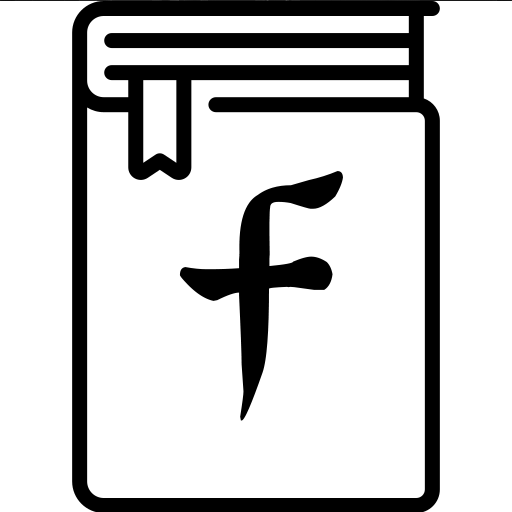
<style>
.page{position:relative;width:512px;height:512px;background:#ffffff}
.page>*{position:absolute;margin:0}
.t1{font:293.3px "Korean-Calligraphy";letter-spacing:-0.05em;color:#000000}
</style>
<div class="page">
<p class="t1" style="left:179px;top:170px;width:164px;height:250px">F</p>
</div>
